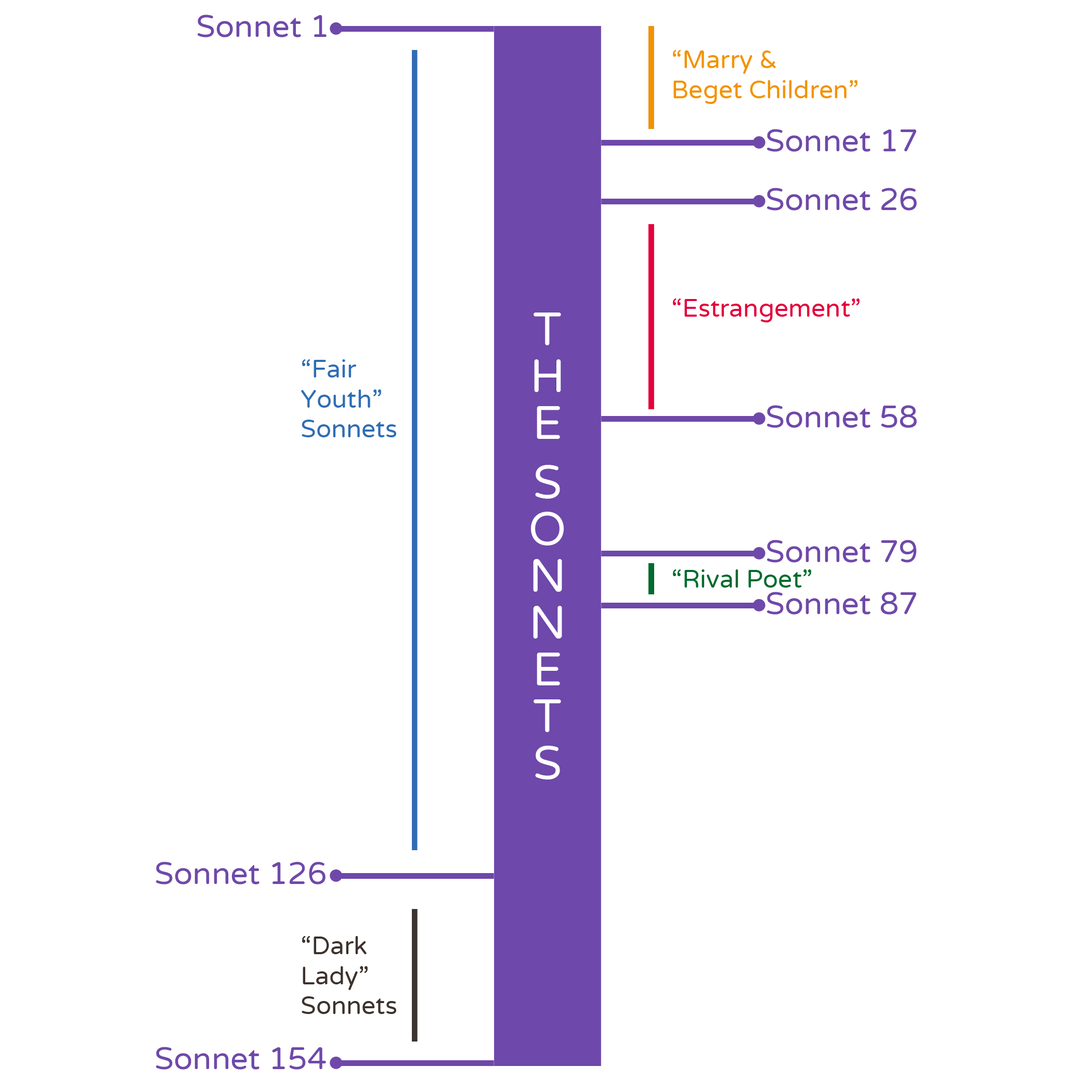
<style>
.page{position:relative;width:1092px;height:1092px;background:#ffffff}
.page>*{position:absolute;margin:0}
.t1{font:31.2px "VarelaRound-Regular";color:#6f49aa}
.t2{font:25px "VarelaRound-Regular";color:#f39200}
.t3{font:25px "VarelaRound-Regular";color:#e4003b}
.t4{font:46.8px "VarelaRound-Regular";color:#ffffff}
.t5{font:25px "VarelaRound-Regular";color:#2f6db4}
.t6{font:25px "VarelaRound-Regular";color:#006b2d}
.t7{font:25px "VarelaRound-Regular";color:#3d322d}
</style>
<div class="page">
<p class="t1" style="left:198px;top:15px;width:129px;height:22px">Sonnet 1</p>
<p class="t2" style="left:673px;top:50px;width:184px;height:54px">“Marry &amp;<br>Beget Children”</p>
<p class="t1" style="left:767px;top:129px;width:149px;height:23px">Sonnet 17</p>
<p class="t1" style="left:767px;top:188px;width:150px;height:23px">Sonnet 26</p>
<p class="t3" style="left:673px;top:298px;width:187px;height:24px">“Estrangement”</p>
<p class="t4" style="left:531px;top:313px;width:33px;height:466px">THE SONNETS</p>
<p class="t5" style="left:301px;top:359px;width:95px;height:78px">“Fair<br>Youth”<br>Sonnets</p>
<p class="t1" style="left:767px;top:405px;width:150px;height:23px">Sonnet 58</p>
<p class="t1" style="left:767px;top:540px;width:150px;height:23px">Sonnet 79</p>
<p class="t6" style="left:673px;top:569px;width:138px;height:19px">“Rival Poet”</p>
<p class="t1" style="left:767px;top:592px;width:149px;height:23px">Sonnet 87</p>
<p class="t1" style="left:156px;top:862px;width:170px;height:23px">Sonnet 126</p>
<p class="t7" style="left:302px;top:936px;width:94px;height:78px">“Dark<br>Lady” <br>Sonnets</p>
<p class="t1" style="left:156px;top:1047px;width:170px;height:23px">Sonnet 154</p>
</div>
